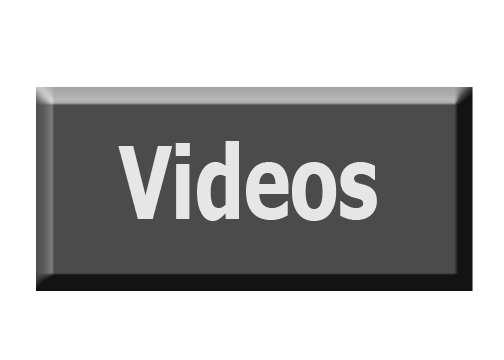
<style>
.page{position:relative;width:504px;height:360px;background:#ffffff}
.page>*{position:absolute;margin:0}
.t1{font:101.2px "Tahoma-Bold";color:#e6e6e6;scale:0.77 1}
</style>
<div class="page">
<p class="t1" style="left:118px;top:141px;width:259px;height:80px">Videos</p>
</div>
